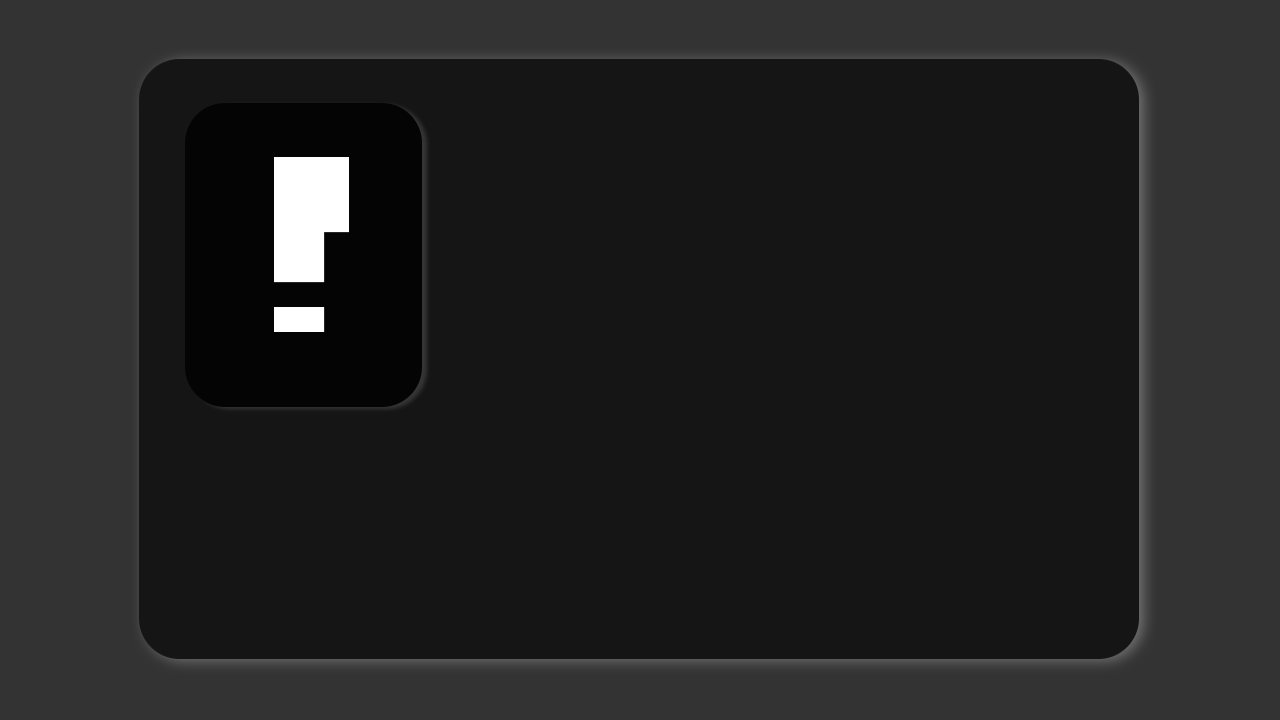
<style>
.page{position:relative;width:1280px;height:720px;background:#151515}
.page>*{position:absolute;margin:0}
.t1{font:200px "Emulogic";color:#ffffff}
</style>
<div class="page">
<p class="t1" style="left:274px;top:157px;width:75px;height:175px">!</p>
</div>
